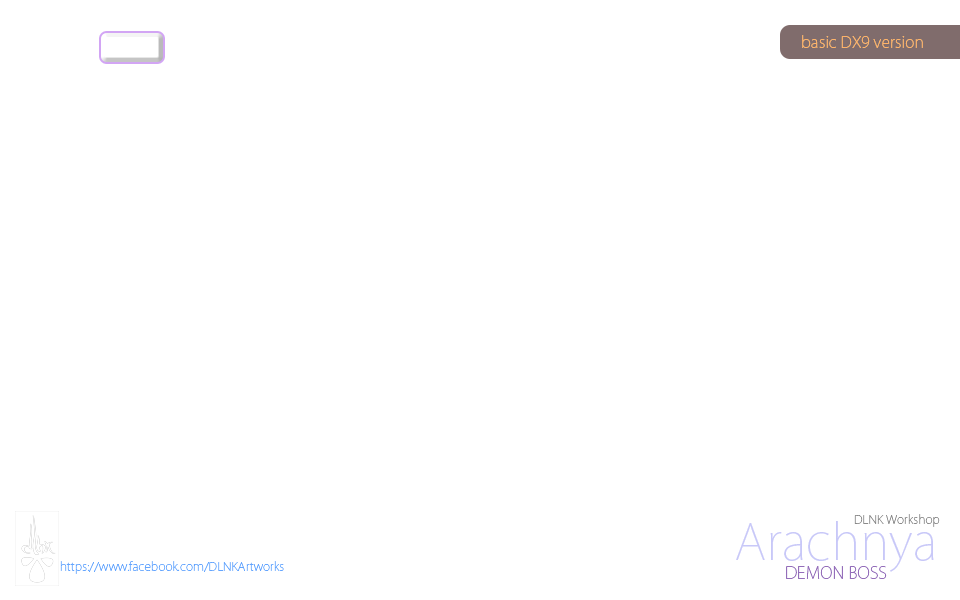
<style>
.page{position:relative;width:960px;height:600px;background:#ffffff}
.page>*{position:absolute;margin:0}
.t1{font:16px "KozGoPr6N-ExtraLight";color:#ffb368}
.t2{font:49.5px "KozGoPr6N-ExtraLight";color:#c8c8f8}
.t3{font:12px "KozGoPr6N-ExtraLight";color:#8a8a8a}
.t4{font:12px "KozGoPr6N-ExtraLight";color:#64a5fe}
.t5{font:12px "KozGoPr6N-ExtraLight";color:#ffffff}
.t6{font:16.8px "KozGoPr6N-ExtraLight";color:#946eba}
</style>
<div class="page">
<p class="t1" style="left:802px;top:35px;width:121px;height:13px">basic DX9 version</p>
<p class="t2" style="left:736px;top:521px;width:198px;height:51px">Arachnya</p>
<p class="t3" style="left:854px;top:514px;width:86px;height:13px">DLNK Workshop</p>
<p class="t4" style="left:60px;top:547px;width:224px;height:27px"><span class="t5">www.daelonik.com<br></span>https://www.facebook.com/DLNKArtworks</p>
<p class="t6" style="left:786px;top:566px;width:101px;height:13px">DEMON BOSS</p>
</div>
